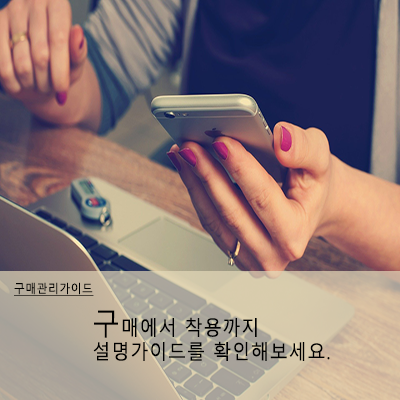
<style>
.page{position:relative;width:400px;height:400px}
.page>*{position:absolute;margin:0}
.t1{font:12px "MalgunGothic";letter-spacing:0.05em;color:#000000;text-decoration:underline;scale:0.9 1}
.t2{font:20px "MalgunGothic";letter-spacing:0.05em;color:#000000;scale:0.9 1}
.t3{font:30px "MalgunGothic";letter-spacing:0.05em;color:#000000;scale:0.9 1}
</style>
<div class="page">
<p class="t1" style="left:14px;top:282px;width:80px;height:14px">구매관리가이드</p>
<p class="t2" style="left:93px;top:310px;width:237px;height:51px"><span class="t3">구</span>매에서 착용까지 <br>설명가이드를 확인해보세요.</p>
</div>
